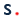
<style>
.page{position:relative;width:20px;height:20px;background:#ffffff}
.page>*{position:absolute;margin:0}
.t1{font:22.8px "GillSans";color:#0f2946}
</style>
<div class="page">
<p class="t1" style="left:4px;top:4px;width:8px;height:11px">s</p>
</div>
